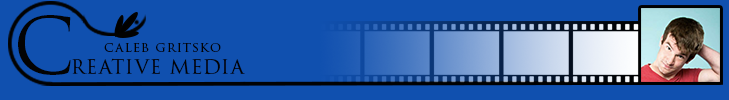
<style>
.page{position:relative;width:729px;height:100px;background:#1050af}
.page>*{position:absolute;margin:0}
.t1{font:77.2px "TrajanPro3-Regular";letter-spacing:0.075em;color:#030303}
.t2{font:13.5px "TrajanPro3-Regular";letter-spacing:0.075em;color:#030303}
.t3{font:22.1px "TrajanPro3-Regular";letter-spacing:0.025em;color:#030303}
</style>
<div class="page">
<p class="t1" style="left:18px;top:15px;width:53px;height:60px">C</p>
<p class="t2" style="left:104px;top:42px;width:117px;height:10px">caleb gritsko</p>
<p class="t3" style="left:72px;top:58px;width:173px;height:17px">reative media</p>
</div>
